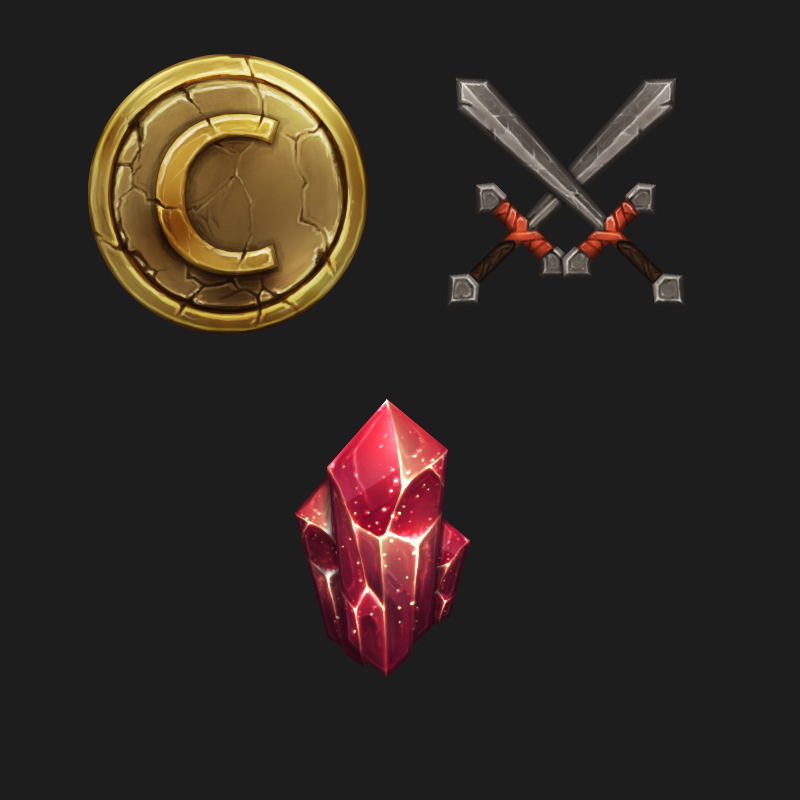
<style>
.page{position:relative;width:800px;height:800px;background:#1d1d1d}
.page>*{position:absolute;margin:0}
.t1{font:320px "MyriadPro-Regular"}
</style>
<div class="page">
<p class="t1" style="left:156px;top:113px;width:123px;height:163px">c</p>
</div>
